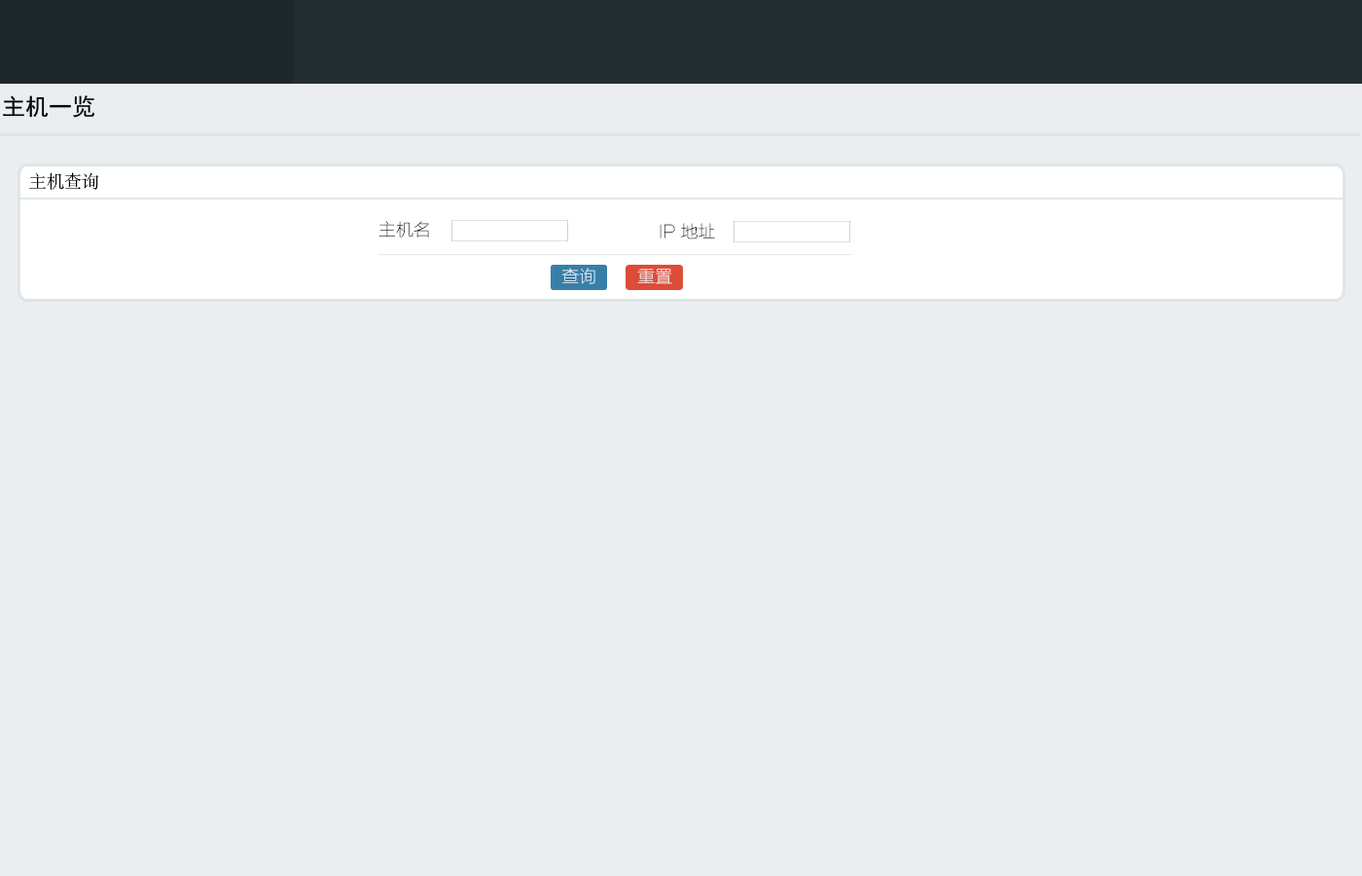
<style>
.page{position:relative;width:1362px;height:876px;background:#ebeef0}
.page>*{position:absolute;margin:0}
.t1{font:17.5px "AdobeSongStd-Light";color:#000000}
.t2{font:17.5px "FZLTCXHJW--GB1-0";color:#000000}
.t3{font:17.5px "FZLTCXHJW--GB1-0";color:#ffffff}
.t4{font:17.5px "FZLTCXHJW--GB1-0"}
</style>
<div class="page">
<p class="t1" style="left:29px;top:172px;width:70px;height:18px">主机查询</p>
<p class="t2" style="left:378px;top:221px;width:51px;height:16px">主机名</p>
<p class="t2" style="left:660px;top:223px;width:55px;height:16px">IP地址</p>
<p class="t3" style="left:561px;top:268px;width:34px;height:16px">查询</p>
<p class="t4" style="left:637px;top:268px;width:35px;height:16px">重置</p>
</div>
